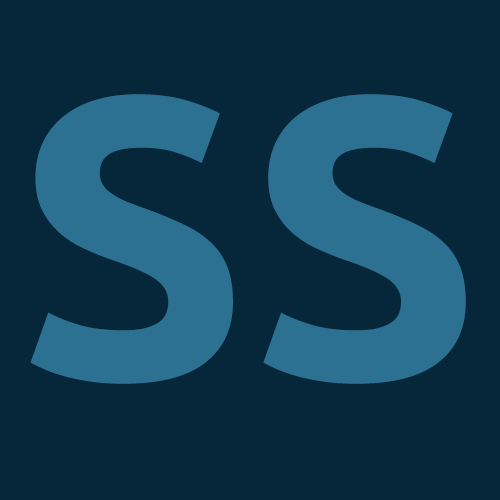
<style>
.page{position:relative;width:500px;height:500px;background:#052739}
.page>*{position:absolute;margin:0}
.t1{font:400px "Ubuntu-Bold";color:#2c7192}
</style>
<div class="page">
<p class="t1" style="left:30px;top:94px;width:436px;height:290px">SS</p>
</div>
